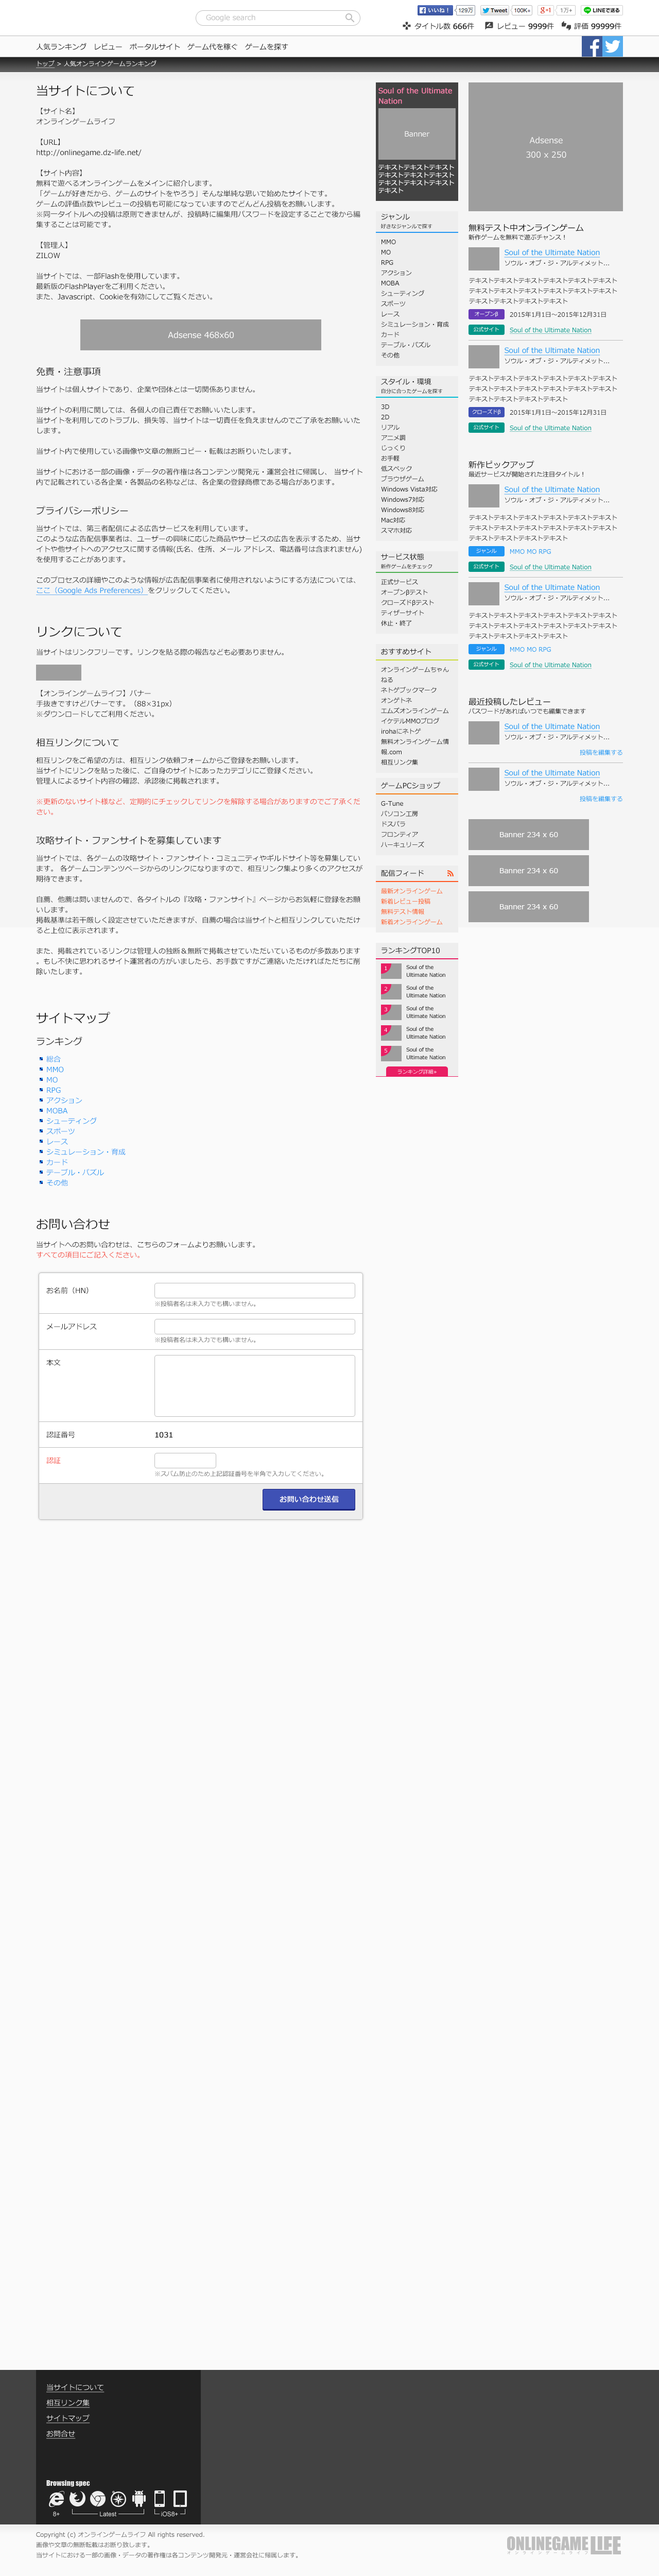
<style>
.page{position:relative;width:659px;height:2576px;background:#fafafa}
.page>*{position:absolute;margin:0}
.t1{font:6.2px "Meiryo";color:#fafafa}
.t2{font:6.2px "Meiryo";color:#fafafa;text-decoration:underline}
.t3{font:12.4px "Meiryo";color:#212121}
.t4{font:7.2px/10.3px "Meiryo";color:#212121}
.t5{font:8.2px "Meiryo";color:#ffffff}
.t6{font:9.3px "Meiryo";color:#212121}
.t7{font:7.2px/10.3px "Meiryo";color:#2196f3;text-decoration:underline}
.t8{font:7.2px/10.3px "Meiryo";color:#f44336}
.t9{font:7.2px/10.3px "Meiryo";color:#2196f3}
.t10{font:7.2px/36.1px "Meiryo";color:#212121}
.t11{font:7.2px/72.1px "Meiryo";color:#212121}
.t12{font:7.2px/25.8px "Meiryo";color:#212121}
.t13{font:7.2px/30.9px "Meiryo";color:#f44336}
.t14{font:6.2px "Meiryo";color:#616161}
.t15{font:7.2px "Meiryo";color:#212121;font-weight:bold}
.t16{font:7.2px "Meiryo";color:#ffffff;font-weight:bold}
</style>
<div class="page">
<p class="t1" style="left:36px;top:60px;width:121px;height:8px"><span class="t2">トップ</span> &gt; 人気オンラインゲームランキング</p>
<p class="t3" style="left:37px;top:85px;width:97px;height:11px">当サイトについて</p>
<p class="t4" style="left:36px;top:108px;width:325px;height:193px">【サイト名】<br>オンラインゲームライフ<br><br>【URL】<br>http://onlinegame.dz-life.net/<br><br>【サイト内容】<br>無料で遊べるオンラインゲームをメインに紹介します。<br>「ゲームが好きだから、ゲームのサイトをやろう」そんな単純な思いで始めたサイトです。<br>ゲームの評価点数やレビューの投稿も可能になっていますのでどんどん投稿をお願いします。<br>※同一タイトルへの投稿は原則できませんが、投稿時に編集用パスワードを設定することで後から編集することは可能です。<br><br>【管理人】<br>ZILOW<br><br>当サイトでは、一部Flashを使用しています。<br>最新版のFlashPlayerをご利用ください。<br>また、Javascript、Cookieを有効にしてご覧ください。</p>
<p class="t5" style="left:168px;top:331px;width:66px;height:7px">Adsense 468x60</p>
<p class="t6" style="left:36px;top:367px;width:65px;height:9px">免責・注意事項</p>
<p class="t4" style="left:37px;top:386px;width:326px;height:99px">当サイトは個人サイトであり、企業や団体とは一切関係ありません。<br><br>当サイトの利用に関しては、各個人の自己責任でお願いいたします。<br>当サイトを利用してのトラブル、損失等、当サイトは一切責任を負えませんのでご了承をお願いいたします。<br><br>当サイト内で使用している画像や文章の無断コピー・転載はお断りいたします。<br><br>当サイトにおける一部の画像・データの著作権は各コンテンツ開発元・運営会社に帰属し、 当サイト内で記載されている各企業・各製品の名称などは、各企業の登録商標である場合があります。</p>
<p class="t6" style="left:37px;top:506px;width:91px;height:9px">プライバシーポリシー</p>
<p class="t4" style="left:36px;top:525px;width:326px;height:70px">当サイトでは、第三者配信による広告サービスを利用しています。<br>このような広告配信事業者は、ユーザーの興味に応じた商品やサービスの広告を表示するため、当サイトや他サイトへのアクセスに関する情報(氏名、住所、メール アドレス、電話番号は含まれません)を使用することがあります。<br><br>このプロセスの詳細やこのような情報が広告配信事業者に使用されないようにする方法については、<span class="t7">ここ（Google Ads Preferences）</span>をクリックしてください。</p>
<p class="t3" style="left:38px;top:626px;width:84px;height:11px">リンクについて</p>
<p class="t4" style="left:36px;top:649px;width:248px;height:68px">当サイトはリンクフリーです。リンクを貼る際の報告なども必要ありません。<br><br><br><br>【オンラインゲームライフ】バナー<br>手抜きですけどバナーです。（88×31px）<br>※ダウンロードしてご利用ください。</p>
<p class="t6" style="left:36px;top:738px;width:83px;height:9px">相互リンクについて</p>
<p class="t4" style="left:36px;top:757px;width:324px;height:58px">相互リンクをご希望の方は、相互リンク依頼フォームからご登録をお願いします。<br>当サイトにリンクを貼った後に、ご自身のサイトにあったカテゴリにご登録ください。<br>管理人によるサイト内容の確認、承認後に掲載されます。<br><br><span class="t8">※更新のないサイト様など、定期的にチェックしてリンクを解除する場合がありますのでご了承ください。</span></p>
<p class="t6" style="left:36px;top:836px;width:186px;height:9px">攻略サイト・ファンサイトを募集しています</p>
<p class="t4" style="left:36px;top:854px;width:327px;height:121px">当サイトでは、各ゲームの攻略サイト・ファンサイト・コミュニティやギルドサイト等を募集しています。 各ゲームコンテンツページからのリンクになりますので、相互リンク集より多くのアクセスが期待できます。<br><br>自薦、他薦は問いませんので、各タイトルの『攻略・ファンサイト』ページからお気軽に登録をお願いします。<br>掲載基準は若干厳しく設定させていただきますが、自薦の場合は当サイトと相互リンクしていただけると上位に表示されます。<br><br>また、掲載されているリンクは管理人の独断＆無断で掲載させていただいているものが多数あります。もし不快に思われるサイト運営者の方がいましたら、お手数ですがご連絡いただければただちに削除いたします。</p>
<p class="t3" style="left:36px;top:1012px;width:74px;height:12px">サイトマップ</p>
<p class="t6" style="left:37px;top:1037px;width:45px;height:8px">ランキング</p>
<p class="t9" style="left:46px;top:1056px;width:80px;height:130px">総合<br>MMO<br>MO<br>RPG<br>アクション<br>MOBA<br>シューティング<br>スポーツ<br>レース<br>シミュレーション・育成<br>カード<br>テーブル・パズル<br>その他</p>
<p class="t3" style="left:37px;top:1218px;width:73px;height:12px">お問い合わせ</p>
<p class="t4" style="left:37px;top:1241px;width:218px;height:17px">当サイトへのお問い合わせは、こちらのフォームよりお願いします。<br><span class="t8">すべての項目にご記入ください。</span></p>
<p class="t10" style="left:46px;top:1287px;width:51px;height:177px">お名前（HN）<br>メールアドレス<br><span class="t11">本文<br></span><span class="t12">認証番号<br></span><span class="t13">認証</span></p>
<p class="t14" style="left:155px;top:1300px;width:101px;height:7px">※投稿者名は未入力でも構いません。</p>
<p class="t14" style="left:155px;top:1336px;width:101px;height:7px">※投稿者名は未入力でも構いません。</p>
<p class="t15" style="left:155px;top:1432px;width:18px;height:6px">1031</p>
<p class="t14" style="left:155px;top:1470px;width:169px;height:7px">※スパム防止のため上記認証番号を半角で入力してください。</p>
<p class="t16" style="left:280px;top:1496px;width:59px;height:7px">お問い合わせ送信</p>
</div>
